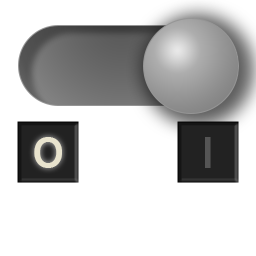
<style>
.page{position:relative;width:256px;height:256px;background:#ffffff}
.page>*{position:absolute;margin:0}
.t1{font:48px "SourceSansPro-SemiBold";letter-spacing:0.1em;color:#e8e3ce}
.t2{font:48px "SourceSansPro-SemiBold";letter-spacing:0.1em;color:#555555}
</style>
<div class="page">
<p class="t1" style="left:34px;top:137px;width:28px;height:31px">O</p>
<p class="t2" style="left:205px;top:137px;width:6px;height:31px">I</p>
</div>
